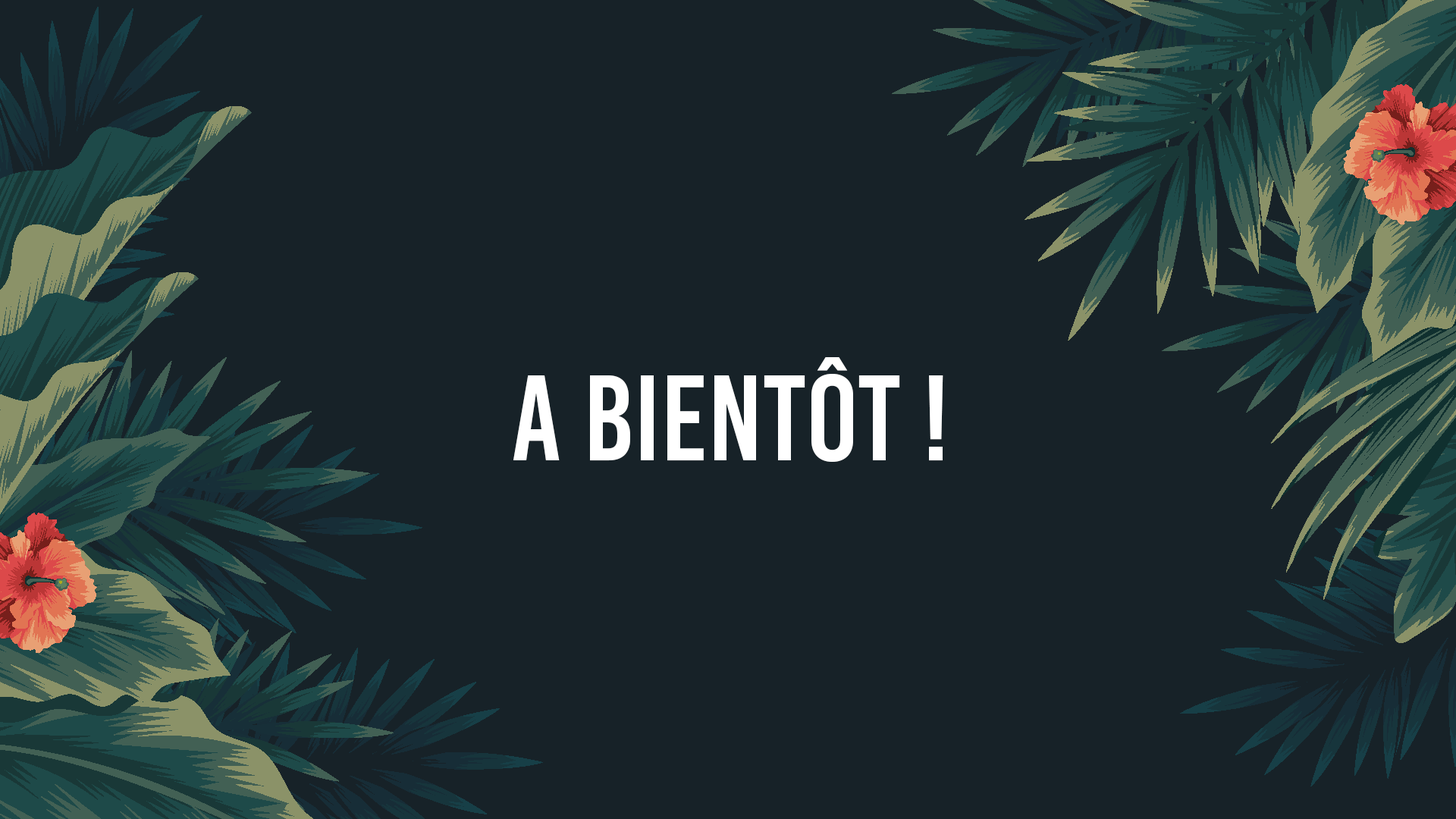
<style>
.page{position:relative;width:1456px;height:819px;background:#172228}
.page>*{position:absolute;margin:0}
.t1{font:121.3px "BebasKai";color:#ffffff}
</style>
<div class="page">
<p class="t1" style="left:513px;top:357px;width:430px;height:105px">A bientôt !</p>
</div>
